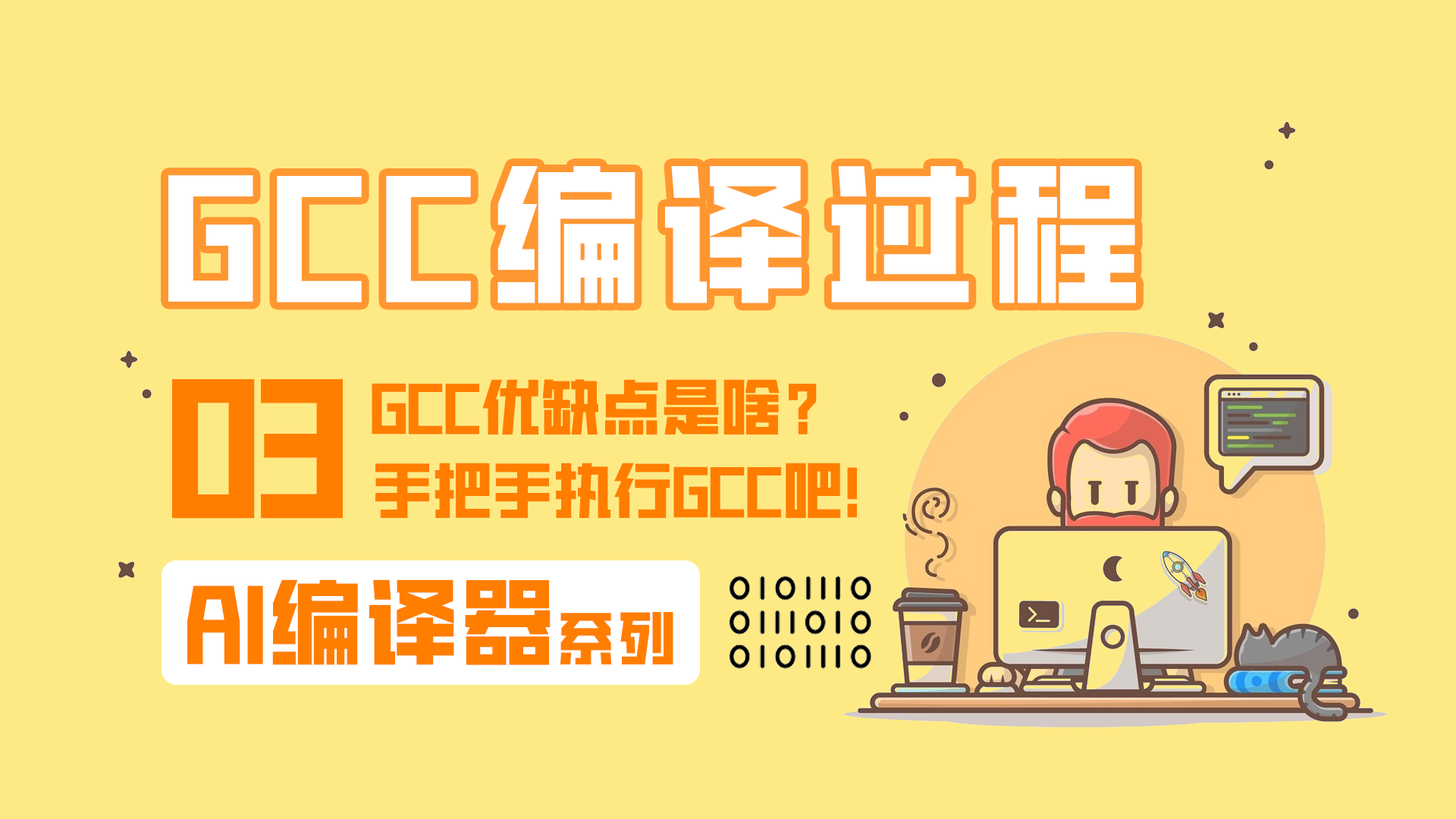
<style>
.page{position:relative;width:1456px;height:819px;background:#feea85}
.page>*{position:absolute;margin:0}
.t1{font:151.7px "HGGTZHVF-Medium";letter-spacing:0.1em;color:#ffffff}
.t2{font:166.8px "HGGTZHVF-Medium";letter-spacing:-0.01em;color:#ff7e00}
.t3{font:60.7px "HGGTZHVF-Medium";letter-spacing:-0.01em;color:#ff7e00;font-weight:bold}
.t4{font:93.8px "HGGTZHVF-Medium";letter-spacing:0.025em;color:#ff7e00;font-weight:bold}
.t5{font:58.2px "HGGTZHVF-Medium";letter-spacing:0.05em;color:#ff7e00;font-weight:bold}
</style>
<div class="page">
<p class="t1" style="left:168px;top:166px;width:968px;height:137px">GCC编译过程</p>
<p class="t2" style="left:172px;top:379px;width:171px;height:140px">03</p>
<p class="t3" style="left:372px;top:379px;width:445px;height:56px">GCC优缺点是啥？</p>
<p class="t3" style="left:375px;top:463px;width:482px;height:55px">手把手执行GCC吧！</p>
<p class="t4" style="left:187px;top:579px;width:364px;height:86px">AI编译器</p>
<p class="t5" style="left:560px;top:612px;width:113px;height:53px">系列</p>
</div>
